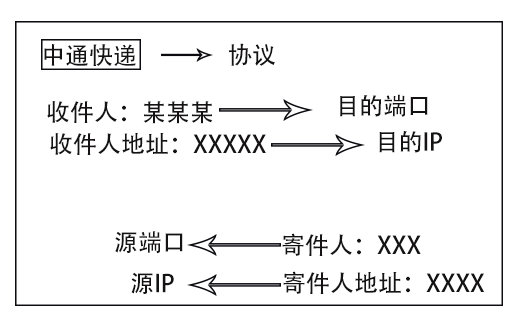
<style>
.page{position:relative;width:528px;height:324px;background:#ffffff}
.page>*{position:absolute;margin:0}
.t1{font:24px "AdobeHeitiStd-Regular";color:#141212}
</style>
<div class="page">
<p class="t1" style="left:44px;top:44px;width:92px;height:23px">中通快递</p>
<p class="t1" style="left:228px;top:43px;width:47px;height:23px">协议</p>
<p class="t1" style="left:47px;top:101px;width:166px;height:23px">收件人：某某某</p>
<p class="t1" style="left:340px;top:94px;width:88px;height:23px">目的端口</p>
<p class="t1" style="left:50px;top:133px;width:216px;height:22px">收件人地址：XXXXX</p>
<p class="t1" style="left:379px;top:131px;width:63px;height:22px">目的IP</p>
<p class="t1" style="left:115px;top:231px;width:68px;height:23px">源端口</p>
<p class="t1" style="left:282px;top:233px;width:139px;height:23px">寄件人：XXX</p>
<p class="t1" style="left:131px;top:272px;width:43px;height:23px">源IP</p>
<p class="t1" style="left:283px;top:271px;width:202px;height:23px">寄件人地址：XXXX</p>
</div>
